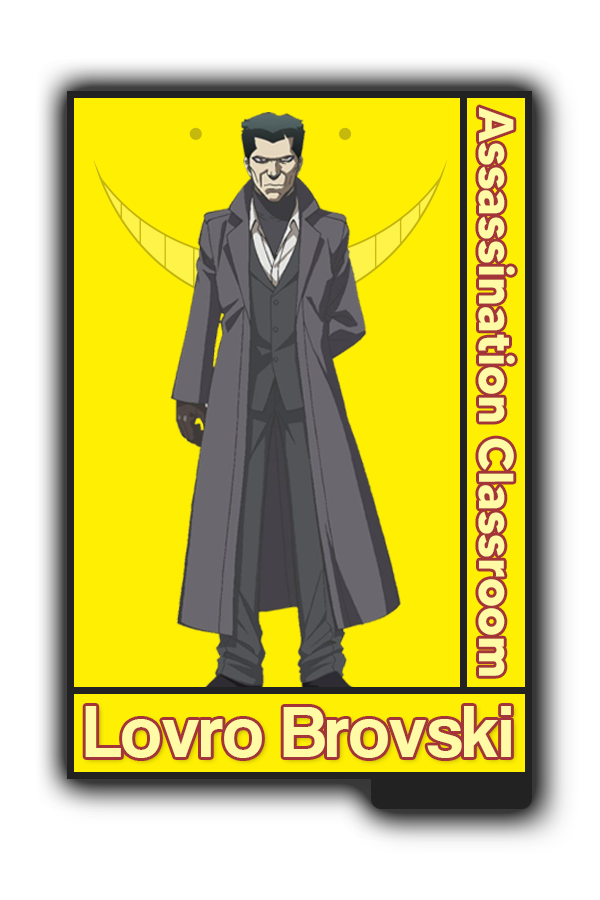
<style>
.page{position:relative;width:600px;height:900px;background:#ffef03}
.page>*{position:absolute;margin:0}
.t1{font:48.8px "MADETOMMY-Bold";color:#fefaa5}
.t2{font:75px "CoolveticaRg-Regular";color:#fefaa5}
</style>
<div class="page">
<p class="t1" style="left:478px;top:107px;width:37px;height:569px;rotate:90deg">Assassination Classroom</p>
<p class="t2" style="left:85px;top:706px;width:426px;height:52px">Lovro Brovski</p>
</div>
